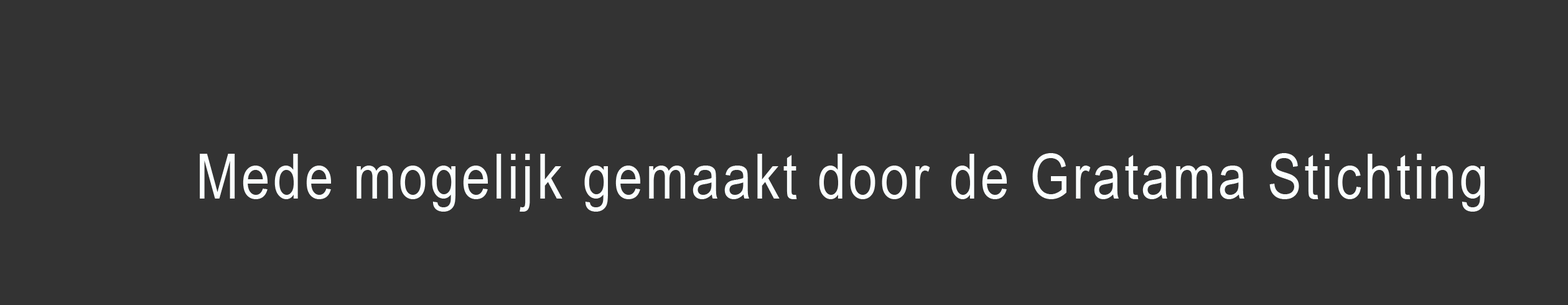
<style>
.page{position:relative;width:1568px;height:305px;background:#333333}
.page>*{position:absolute;margin:0}
.t1{font:62.2px "ArialNarrow";letter-spacing:0.05em;color:#fbffff}
.t2{font:62.2px "MyriadPro-Regular";letter-spacing:0.05em;color:#fbffff}
</style>
<div class="page">
<p class="t1" style="left:200px;top:153px;width:1285px;height:59px"><span class="t2"><br></span>Mede mogelijk gemaakt door de Gratama Stichting</p>
</div>
